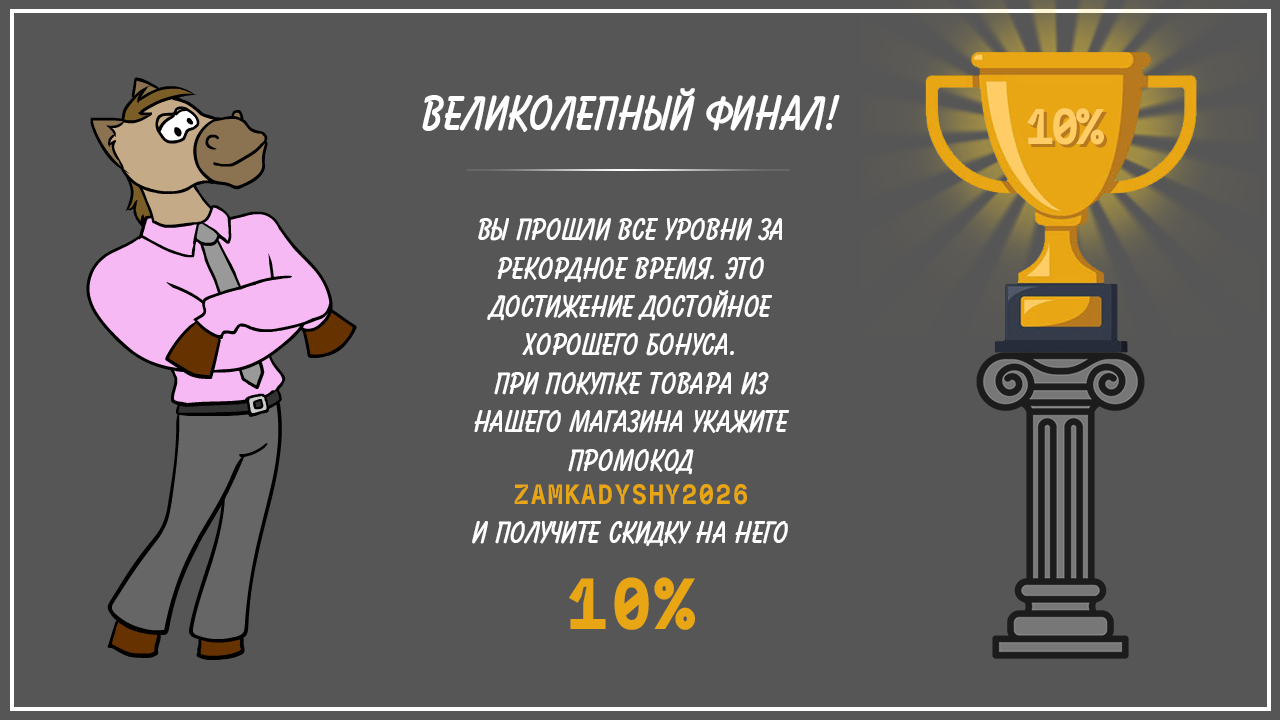
<style>
.page{position:relative;width:1280px;height:720px;background:#565656}
.page>*{position:absolute;margin:0}
.t1{font:50px "BalloonBdBTrusbyme-Bold";color:#ffffff;text-transform:uppercase}
.t2{font:50px "FliegeMono-Bold";letter-spacing:-0.1em;color:#ffcc66;text-transform:uppercase}
.t3{font:32px "BalloonBdBTrusbyme-Bold";color:#ffffff;text-transform:uppercase}
.t4{font:28px "FliegeMono-Bold";color:#e8a614;text-transform:uppercase}
.t5{font:72px "FliegeMono-ExtraBold";color:#e8a614;text-transform:uppercase}
</style>
<div class="page">
<p class="t1" style="left:422px;top:88px;width:418px;height:44px">Великолепный финал!</p>
<p class="t2" style="left:1027px;top:108px;width:77px;height:37px">10%</p>
<p class="t3" style="left:472px;top:218px;width:317px;height:412px;text-align:center">вы прошли все уровни за рекордное время. это достижение достойное хорошего бонуса.<br>При покупке товара из нашего магазина укажите  промокод<br><span class="t4">zamkadyshy2026<br></span>и получите скидку на него<br><span class="t5">10%</span></p>
</div>
